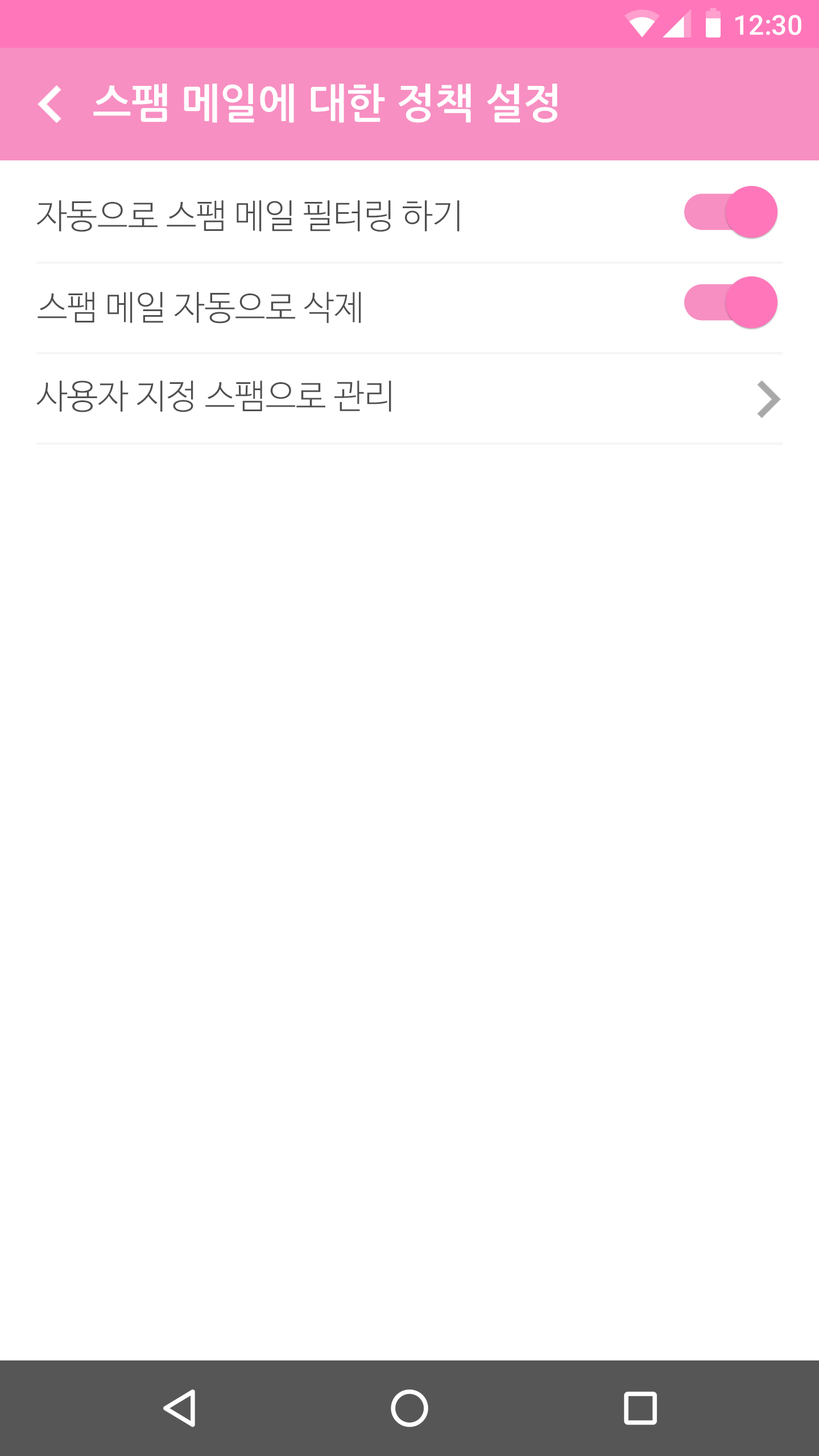
<style>
.page{position:relative;width:819px;height:1456px;background:#ffffff}
.page>*{position:absolute;margin:0}
.t1{font:27.3px "Roboto-Medium";color:#ffffff}
.t2{font:40.9px "NanumGothicBold";color:#ffffff}
.t3{font:34.2px "NanumBarunGothicLight";color:#4f4f4f}
</style>
<div class="page">
<p class="t1" style="left:735px;top:15px;width:66px;height:20px">12:30</p>
<p class="t2" style="left:93px;top:84px;width:464px;height:39px">스팸 메일에 대한 정책 설정</p>
<p class="t3" style="left:36px;top:200px;width:424px;height:32px">자동으로 스팸 메일 필터링 하기</p>
<p class="t3" style="left:38px;top:292px;width:323px;height:32px">스팸 메일 자동으로 삭제</p>
<p class="t3" style="left:36px;top:380px;width:355px;height:32px">사용자 지정 스팸으로 관리</p>
</div>
